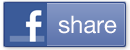
<style>
.page{position:relative;width:130px;height:50px}
.page>*{position:absolute;margin:0}
.t1{font:24px "HelveticaNeue"}
.t2{font:24px "HelveticaNeue";color:#fffdfd}
</style>
<div class="page">
<p class="t1" style="left:58px;top:15px;width:56px;height:19px">email</p>
<p class="t2" style="left:58px;top:15px;width:59px;height:19px">share</p>
</div>
